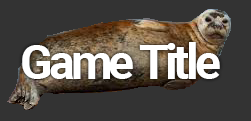
<style>
.page{position:relative;width:251px;height:121px;background:#333333}
.page>*{position:absolute;margin:0}
.t1{font:48.5px "Roboto-Bold";letter-spacing:-0.08em;color:#ffffff}
</style>
<div class="page">
<p class="t1" style="left:22px;top:42px;width:198px;height:37px">Game Title</p>
</div>
